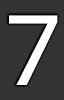
<style>
.page{position:relative;width:64px;height:100px;background:#333333}
.page>*{position:absolute;margin:0}
.t1{font:100px "Amiko-Regular";color:#ffffff}
</style>
<div class="page">
<p class="t1" style="left:9px;top:15px;width:49px;height:70px">7</p>
</div>
